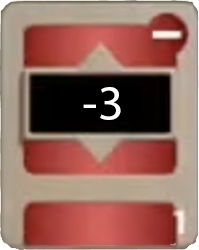
<style>
.page{position:relative;width:199px;height:250px}
.page>*{position:absolute;margin:0}
.t1{font:50px "MyriadPro-Regular";color:#ffffff}
</style>
<div class="page">
<p class="t1" style="left:83px;top:87px;width:38px;height:33px">-3</p>
</div>
